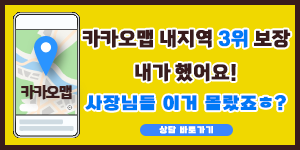
<style>
.page{position:relative;width:300px;height:150px;background:#f0d800}
.page>*{position:absolute;margin:0}
.t1{font:19.3px "TheJamsil6ExtraBold";color:#391c1c;font-variant:small-caps;font-weight:bold}
.t2{font:19.3px "TheJamsil6ExtraBold";color:#0078f6;font-variant:small-caps;font-weight:bold}
.t3{font:17.2px "SBAggroB";letter-spacing:0.05em;color:#0078f6;font-weight:bold}
.t4{font:8.3px "SBAggroB";letter-spacing:0.05em;color:#ffffff;font-weight:bold}
</style>
<div class="page">
<p class="t1" style="left:82px;top:29px;width:209px;height:53px;text-align:center">카카오맵 내지역 <span class="t2">3위</span> 보장<br>내가 했어요!</p>
<p class="t3" style="left:85px;top:95px;width:201px;height:16px">사장님들 이거 몰랐죠ㅎ?</p>
<p class="t4" style="left:159px;top:126px;width:54px;height:8px">상담 바로가기</p>
</div>
